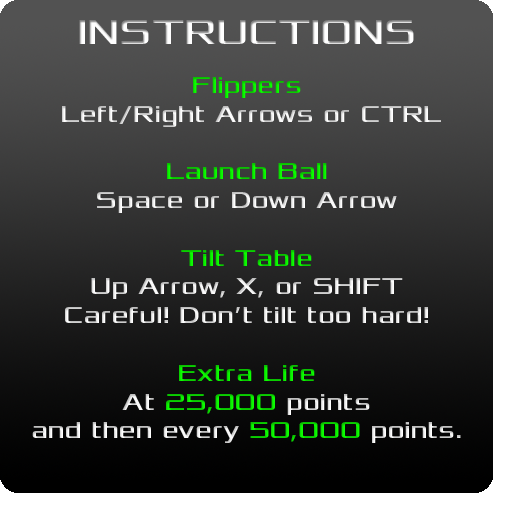
<style>
.page{position:relative;width:512px;height:512px}
.page>*{position:absolute;margin:0}
.t1{font:36px "Xolonium"}
.t2{font:24px "Xolonium"}
</style>
<div class="page">
<p class="t1" style="left:79px;top:20px;width:335px;height:24px">INSTRUCTIONS</p>
<p class="t2" style="left:32px;top:77px;width:429px;height:366px;text-align:center">Flippers<br> Left/Right Arrows or CTRL<br><br>Launch Ball<br>Space or Down Arrow<br><br>Tilt Table<br>Up Arrow, X, or SHIFT<br>Careful! Don’t tilt too hard!<br><br>Extra Life<br>At 25,000 points<br>and then every 50,000 points.</p>
</div>
